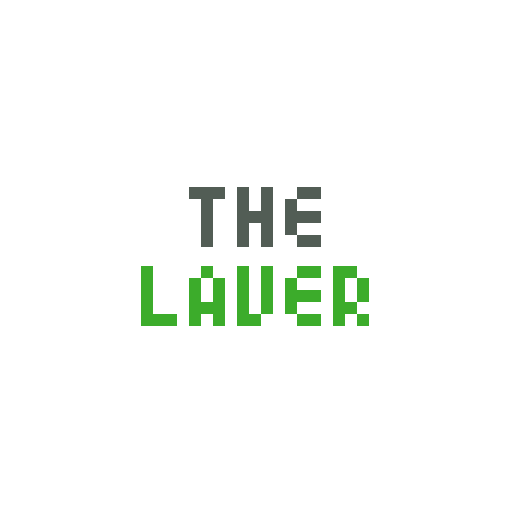
<style>
.page{position:relative;width:512px;height:512px;background:#ffffff}
.page>*{position:absolute;margin:0}
.t1{font:96px "04b24";color:#525d55}
.t2{font:96px "04b24";color:#3cac2b}
</style>
<div class="page">
<p class="t1" style="left:189px;top:187px;width:132px;height:60px">the</p>
<p class="t2" style="left:141px;top:266px;width:228px;height:60px">Laver</p>
</div>
